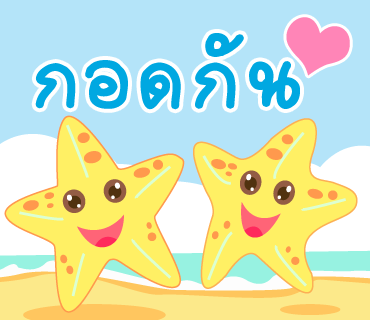
<style>
.page{position:relative;width:370px;height:320px;background:#b4e4f9}
.page>*{position:absolute;margin:0}
.t1{font:130px "2005_iannnnnMTV";letter-spacing:0.025em;color:#00a8e1;scale:1.06 1}
.t2{font:127px "2005_iannnnnMTV";letter-spacing:0.025em;color:#00a8e1;scale:1.06 1}
</style>
<div class="page">
<p class="t1" style="left:195px;top:33px;width:105px;height:76px">กัน</p>
<p class="t2" style="left:35px;top:60px;width:146px;height:50px">กอด</p>
</div>
